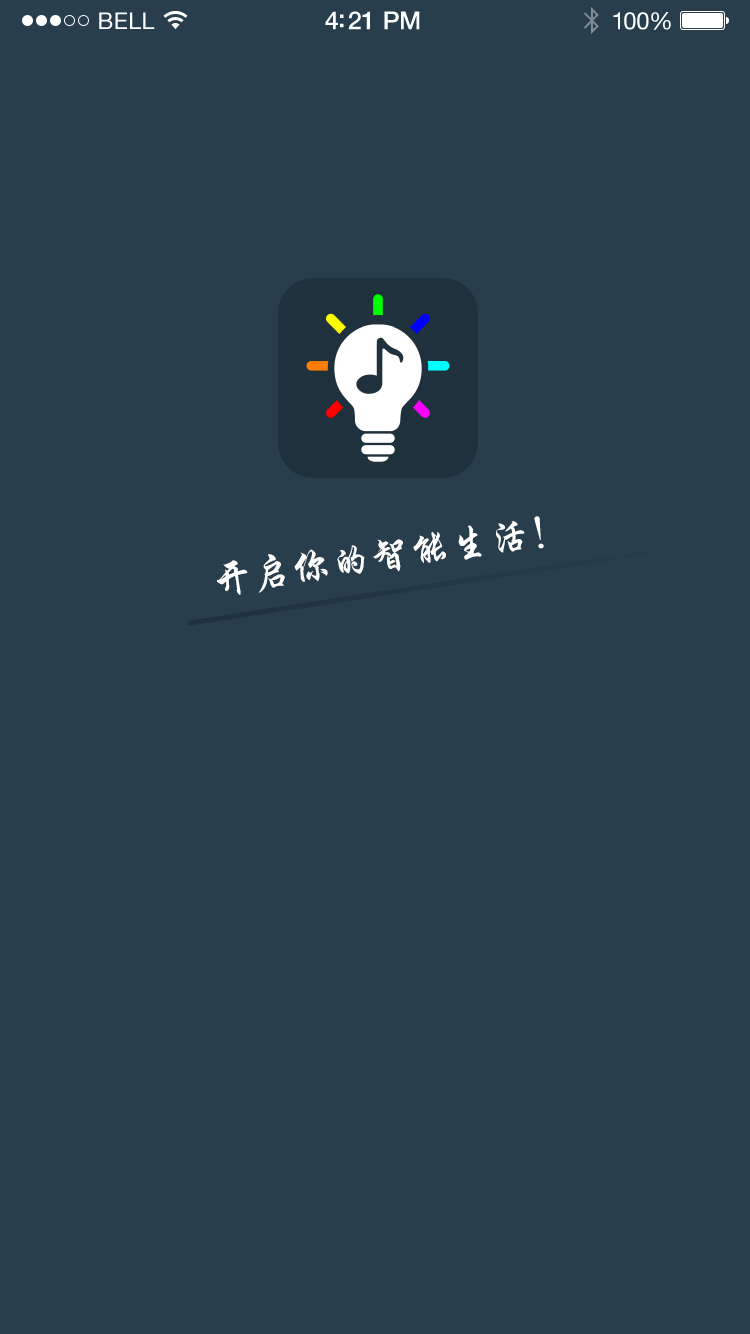
<style>
.page{position:relative;width:750px;height:1334px;background:#283e4d}
.page>*{position:absolute;margin:0}
.t1{font:23px "HelveticaNeue";letter-spacing:0.02em;color:#ffffff}
.t2{font:25px "HelveticaNeue-Medium";letter-spacing:-0.02em;color:#ffffff}
.t3{font:24px "HelveticaNeue";letter-spacing:-0.02em;color:#ffffff}
.t4{font:40px "FZXKJW--GB1-0";color:#ffffff}
</style>
<div class="page">
<p class="t1" style="left:99px;top:12px;width:56px;height:17px">BELL</p>
<p class="t2" style="left:325px;top:11px;width:95px;height:19px">4:21 PM</p>
<p class="t3" style="left:613px;top:12px;width:58px;height:18px">100%</p>
<p class="t4" style="left:217px;top:516px;width:327px;height:79px;rotate:-8deg">开启你的智能生活！</p>
</div>
